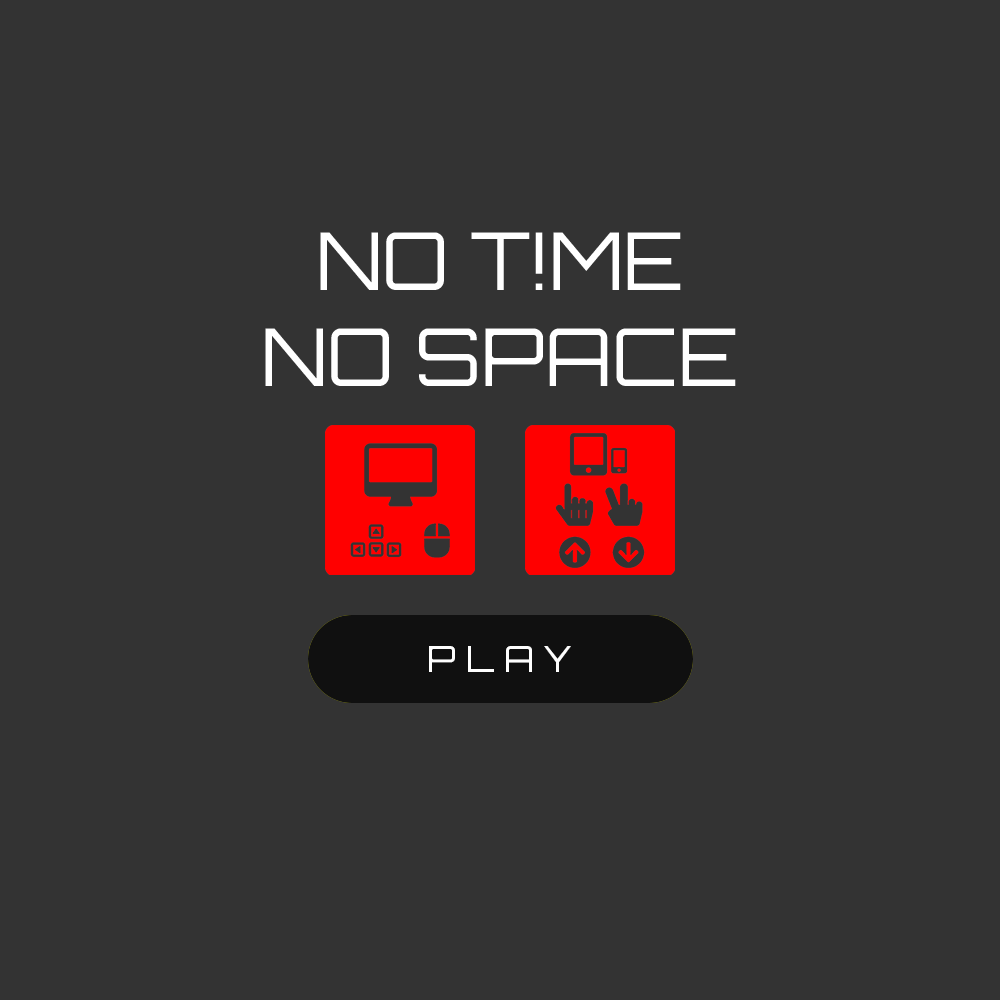
<style>
.page{position:relative;width:1000px;height:1000px;background:#333333}
.page>*{position:absolute;margin:0}
.t1{font:80px "Orbitron-Regular";color:#ffffff}
.t2{font:36px "Orbitron-Regular";color:#fefefe}
</style>
<div class="page">
<p class="t1" style="left:265px;top:232px;width:471px;height:154px;text-align:center">NO T!ME<br>NO SPACE</p>
<p class="t2" style="left:429px;top:646px;width:142px;height:26px">P L A Y</p>
</div>
